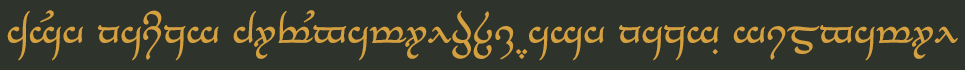
<style>
.page{position:relative;width:965px;height:70px;background:#2e332b}
.page>*{position:absolute;margin:0}
.t1{font:35px "TengwarAnnatar";color:#d5a140}
</style>
<div class="page">
<p class="t1" style="left:7px;top:10px;width:951px;height:51px">As&amp;h na&lt;zg durMbatulûk, &gt;ash nazg (gimbatul</p>
</div>
